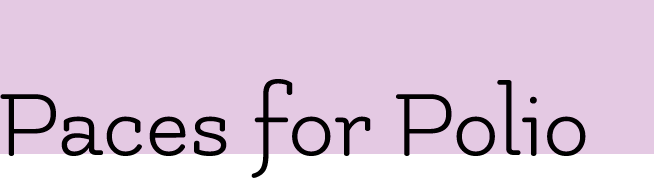
<style>
.page{position:relative;width:654px;height:179px;background:#e4c9e3}
.page>*{position:absolute;margin:0}
.t1{font:100px "Flamenco-Regular";color:#000000}
</style>
<div class="page">
<p class="t1" style="left:0px;top:79px;width:586px;height:99px">Paces for Polio</p>
</div>
